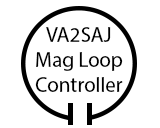
<style>
.page{position:relative;width:160px;height:128px;background:#ffffff}
.page>*{position:absolute;margin:0}
.t1{font:21px/25px "MyriadPro-Regular";color:#000000}
</style>
<div class="page">
<p class="t1" style="left:35px;top:27px;width:88px;height:65px;text-align:center">VA2SAJ<br>Mag Loop<br>Controller</p>
</div>
